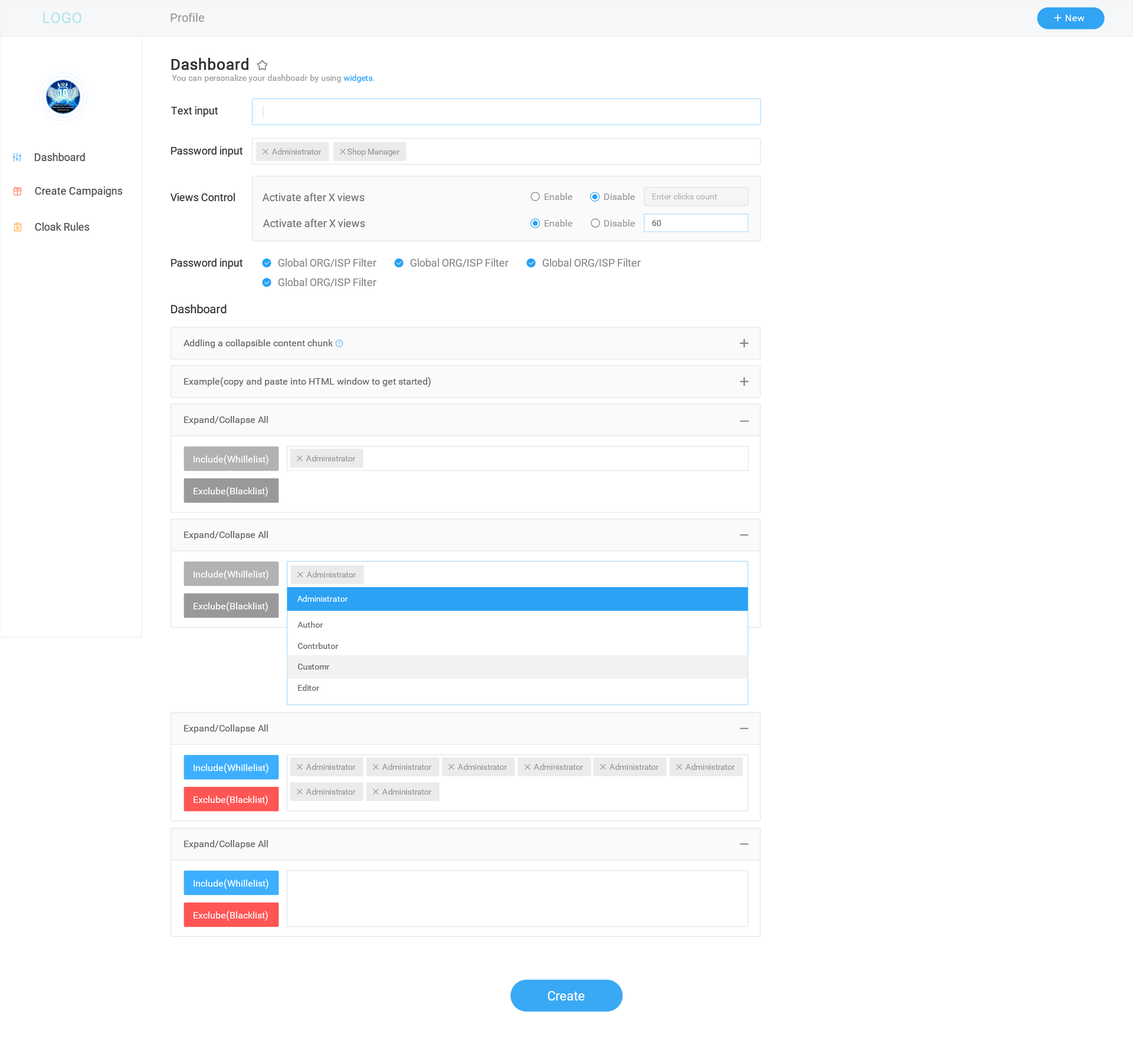
<style>
.page{position:relative;width:1133px;height:1053px;background:#ffffff}
.page>*{position:absolute;margin:0}
.t1{font:15.3px "Roboto-Regular";color:#b5e5e7}
.t2{font:11.8px "Roboto-Regular";color:#999999}
.t3{font:9.7px "Roboto-Regular";color:#ffffff}
.t4{font:15.3px "Roboto-Regular";color:#333333;font-weight:bold}
.t5{font:8.3px "Roboto-Regular";color:#999999}
.t6{font:8.3px "Roboto-Regular";color:#219ef3}
.t7{font:10.6px "Roboto-Regular";color:#333333}
.t8{font:10.6px "Roboto-Regular";color:#4d4d4d}
.t9{font:10.6px "Roboto-Regular";color:#737373}
.t10{font:9.4px "Roboto-Regular";color:#999999}
.t11{font:8.3px "Roboto-Regular";color:#b3b3b3}
.t12{font:8.3px "Roboto-Regular";color:#666666}
.t13{font:10.6px "Roboto-Regular";color:#8c8c8c}
.t14{font:11.8px "Roboto-Regular";color:#333333}
.t15{font:9.4px "Roboto-Regular";color:#666666}
.t16{font:9.4px "Roboto-Regular";color:#ffffff}
.t17{font:8.3px "Roboto-Regular";color:#ffffff}
.t18{font:13px "Roboto-Regular";color:#ffffff}
</style>
<div class="page">
<p class="t1" style="left:43px;top:12px;width:38px;height:11px">LOGO</p>
<p class="t2" style="left:170px;top:13px;width:34px;height:9px">Profile</p>
<p class="t3" style="left:1065px;top:15px;width:19px;height:6px">New</p>
<p class="t4" style="left:171px;top:58px;width:77px;height:12px">Dashboard</p>
<p class="t5" style="left:172px;top:74px;width:202px;height:9px">You can personalize your dashboadr by using <span class="t6">widgets</span>.</p>
<p class="t7" style="left:171px;top:106px;width:47px;height:11px">Text input</p>
<p class="t7" style="left:171px;top:146px;width:71px;height:11px">Password input</p>
<p class="t5" style="left:271px;top:148px;width:50px;height:7px">Administrator</p>
<p class="t5" style="left:347px;top:148px;width:52px;height:8px">Shop Manager</p>
<p class="t8" style="left:35px;top:153px;width:50px;height:8px">Dashboard</p>
<p class="t8" style="left:35px;top:186px;width:87px;height:11px">Create Campaigns</p>
<p class="t7" style="left:170px;top:193px;width:65px;height:8px">Views Control</p>
<p class="t9" style="left:262px;top:193px;width:102px;height:8px">Activate after X views</p>
<p class="t10" style="left:544px;top:193px;width:28px;height:7px">Enable</p>
<p class="t10" style="left:604px;top:193px;width:31px;height:7px">Disable</p>
<p class="t11" style="left:652px;top:193px;width:65px;height:6px">Enter clicks count</p>
<p class="t9" style="left:262px;top:219px;width:103px;height:8px">Activate after X views</p>
<p class="t10" style="left:544px;top:219px;width:28px;height:8px">Enable</p>
<p class="t10" style="left:604px;top:219px;width:31px;height:8px">Disable</p>
<p class="t12" style="left:652px;top:220px;width:9px;height:6px">60</p>
<p class="t8" style="left:35px;top:222px;width:54px;height:9px">Cloak Rules</p>
<p class="t7" style="left:171px;top:258px;width:71px;height:11px">Password input</p>
<p class="t13" style="left:278px;top:258px;width:98px;height:9px">Global ORG/ISP Filter</p>
<p class="t13" style="left:410px;top:258px;width:98px;height:9px">Global ORG/ISP Filter</p>
<p class="t13" style="left:542px;top:258px;width:99px;height:9px">Global ORG/ISP Filter</p>
<p class="t13" style="left:278px;top:278px;width:98px;height:9px">Global ORG/ISP Filter</p>
<p class="t14" style="left:171px;top:304px;width:56px;height:9px">Dashboard</p>
<p class="t15" style="left:183px;top:339px;width:150px;height:9px">Addling a collapsible content chunk</p>
<p class="t15" style="left:184px;top:377px;width:247px;height:10px">Example(copy and paste into HTML window to get started)</p>
<p class="t15" style="left:184px;top:416px;width:84px;height:9px">Expand/Collapse All</p>
<p class="t16" style="left:193px;top:455px;width:75px;height:10px">Include(Whillelist)</p>
<p class="t5" style="left:306px;top:455px;width:49px;height:6px">Administrator</p>
<p class="t16" style="left:193px;top:487px;width:75px;height:10px">Exclube(Blacklist)</p>
<p class="t15" style="left:184px;top:531px;width:84px;height:9px">Expand/Collapse All</p>
<p class="t16" style="left:193px;top:570px;width:75px;height:10px">Include(Whillelist)</p>
<p class="t5" style="left:306px;top:571px;width:50px;height:6px">Administrator</p>
<p class="t16" style="left:193px;top:602px;width:75px;height:10px">Exclube(Blacklist)</p>
<p class="t17" style="left:297px;top:595px;width:51px;height:7px">Administrator</p>
<p class="t12" style="left:297px;top:621px;width:26px;height:7px">Author</p>
<p class="t12" style="left:298px;top:642px;width:40px;height:7px">Contrbutor</p>
<p class="t12" style="left:298px;top:664px;width:31px;height:5px">Customr</p>
<p class="t12" style="left:298px;top:684px;width:21px;height:7px">Editor</p>
<p class="t15" style="left:184px;top:724px;width:84px;height:9px">Expand/Collapse All</p>
<p class="t16" style="left:193px;top:763px;width:75px;height:10px">Include(Whillelist)</p>
<p class="t5" style="left:306px;top:763px;width:49px;height:7px">Administrator</p>
<p class="t5" style="left:382px;top:763px;width:49px;height:7px">Administrator</p>
<p class="t5" style="left:457px;top:763px;width:50px;height:7px">Administrator</p>
<p class="t5" style="left:533px;top:763px;width:50px;height:7px">Administrator</p>
<p class="t5" style="left:609px;top:763px;width:49px;height:7px">Administrator</p>
<p class="t5" style="left:685px;top:763px;width:49px;height:7px">Administrator</p>
<p class="t16" style="left:193px;top:795px;width:75px;height:10px">Exclube(Blacklist)</p>
<p class="t5" style="left:306px;top:788px;width:49px;height:7px">Administrator</p>
<p class="t5" style="left:382px;top:788px;width:49px;height:7px">Administrator</p>
<p class="t15" style="left:184px;top:840px;width:84px;height:9px">Expand/Collapse All</p>
<p class="t16" style="left:193px;top:879px;width:75px;height:10px">Include(Whillelist)</p>
<p class="t16" style="left:193px;top:911px;width:75px;height:10px">Exclube(Blacklist)</p>
<p class="t18" style="left:547px;top:991px;width:38px;height:9px">Create</p>
</div>
